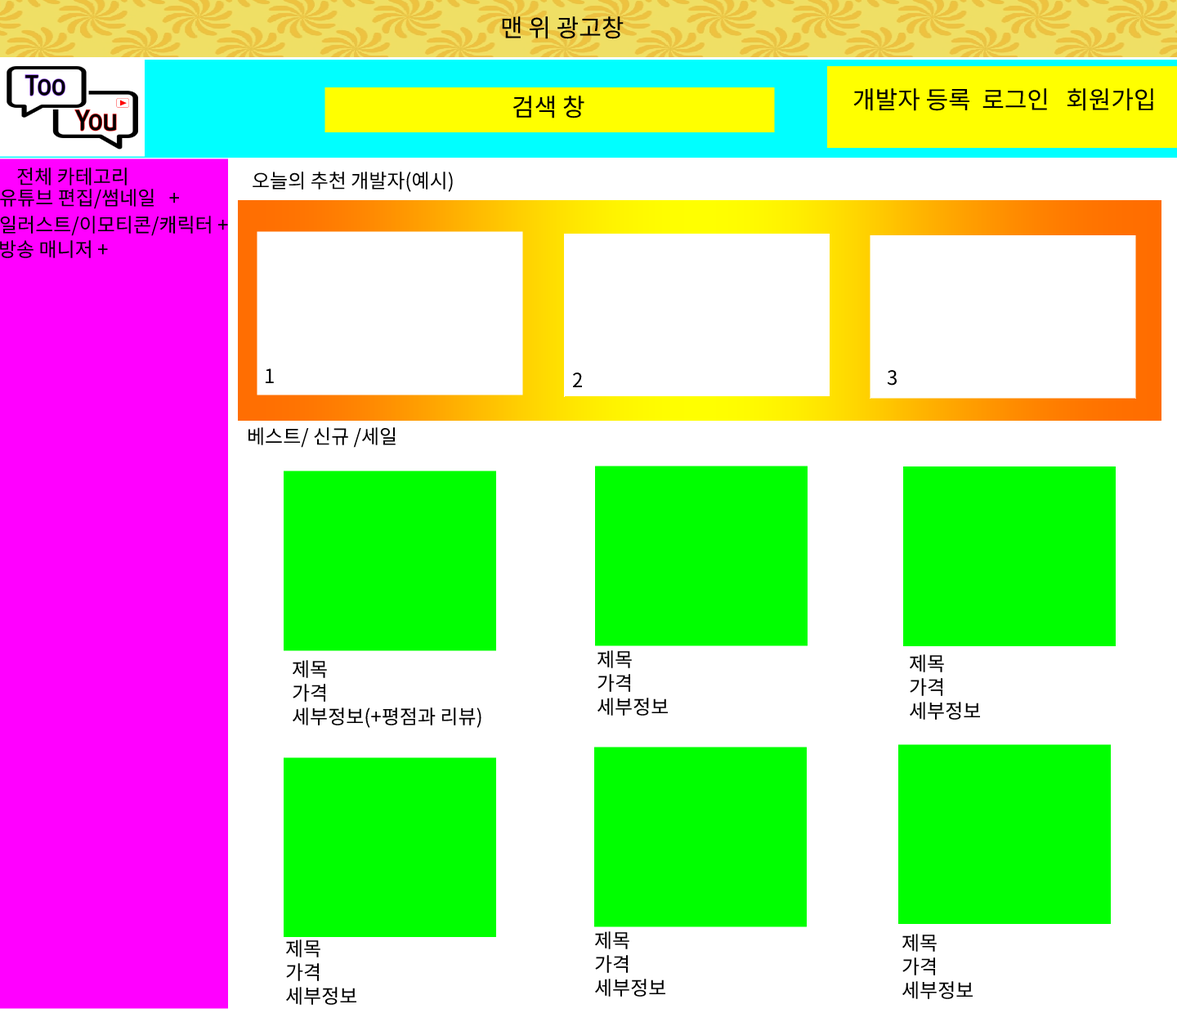
<style>
.page{position:relative;width:1177px;height:1013px;background:#ffffff}
.page>*{position:absolute;margin:0}
.t1{font:24.5px "NotoSansKR-Regular";color:#000000}
.t2{font:19.6px "NotoSansKR-Regular";color:#000000}
</style>
<div class="page">
<p class="t1" style="left:502px;top:16px;width:122px;height:23px">맨 위 광고창</p>
<p class="t1" style="left:853px;top:88px;width:300px;height:23px">개발자 등록  로그인   회원가입</p>
<p class="t1" style="left:512px;top:96px;width:72px;height:22px">검색 창</p>
<p class="t2" style="left:17px;top:168px;width:110px;height:18px">전체 카테고리</p>
<p class="t2" style="left:253px;top:172px;width:200px;height:20px">오늘의 추천 개발자(예시)</p>
<p class="t2" style="left:0px;top:189px;width:179px;height:20px">유튜브 편집/썸네일   +</p>
<p class="t2" style="left:0px;top:216px;width:228px;height:20px">일러스트/이모티콘/캐릭터 +</p>
<p class="t2" style="left:0px;top:240px;width:108px;height:18px">방송 매니저 +</p>
<p class="t2" style="left:266px;top:369px;width:8px;height:14px">1</p>
<p class="t2" style="left:572px;top:373px;width:11px;height:14px">2</p>
<p class="t2" style="left:887px;top:370px;width:9px;height:16px">3</p>
<p class="t2" style="left:248px;top:427px;width:148px;height:21px">베스트/ 신규 /세일</p>
<p class="t2" style="left:597px;top:650px;width:71px;height:66px">제목<br>가격<br>세부정보</p>
<p class="t2" style="left:293px;top:660px;width:188px;height:68px">제목<br>가격<br>세부정보(+평점과 리뷰)</p>
<p class="t2" style="left:910px;top:655px;width:71px;height:65px">제목<br>가격<br>세부정보</p>
<p class="t2" style="left:286px;top:940px;width:71px;height:65px">제목<br>가격<br>세부정보</p>
<p class="t2" style="left:595px;top:932px;width:71px;height:65px">제목<br>가격<br>세부정보</p>
<p class="t2" style="left:902px;top:934px;width:71px;height:65px">제목<br>가격<br>세부정보</p>
</div>
